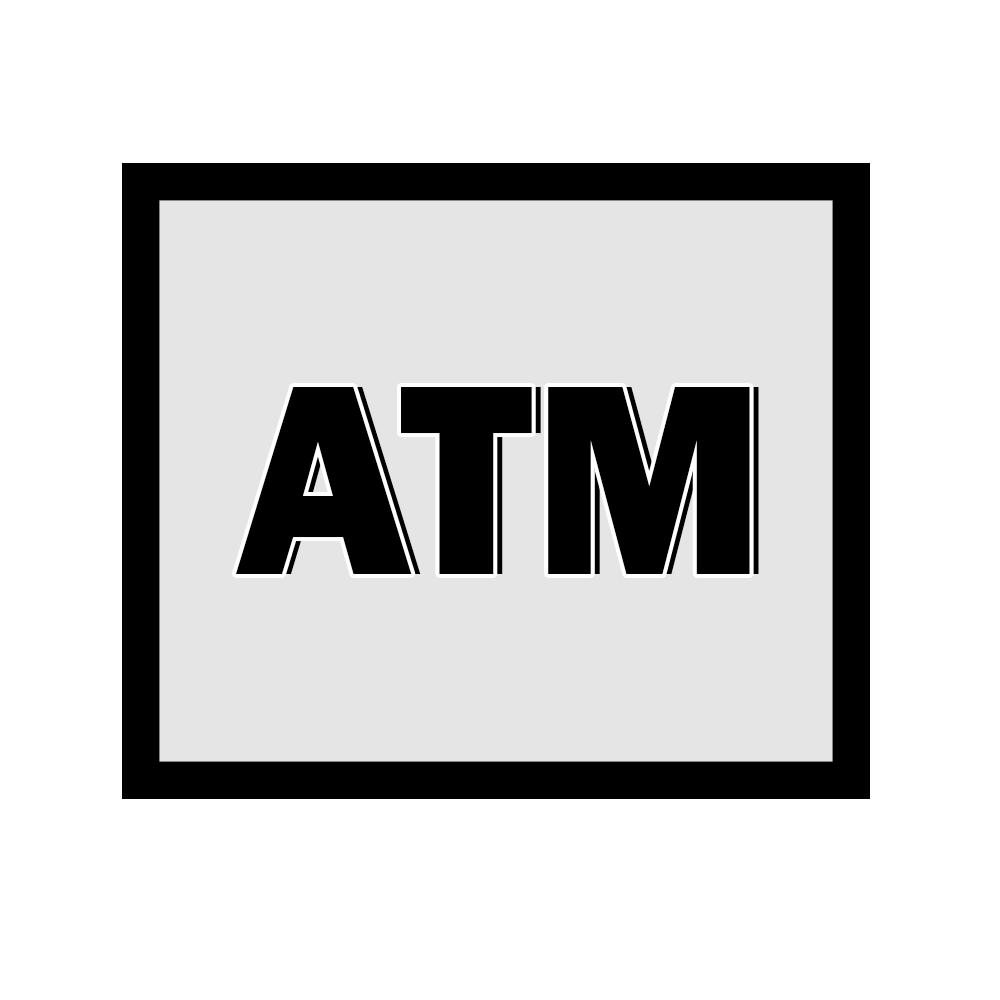
<style>
.page{position:relative;width:1000px;height:1000px;background:#ffffff}
.page>*{position:absolute;margin:0}
.t1{font:281.4px "FranklinGothic-Heavy";color:#000000}
</style>
<div class="page">
<p class="t1" style="left:235px;top:387px;width:515px;height:187px">ATM</p>
<p class="t1" style="left:244px;top:387px;width:515px;height:187px">ATM</p>
</div>
